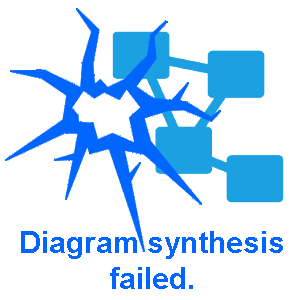
<style>
.page{position:relative;width:300px;height:300px;background:#ffffff}
.page>*{position:absolute;margin:0}
.t1{font:30px "Arial-BoldMT";color:#0066ff}
</style>
<div class="page">
<p class="t1" style="left:21px;top:231px;width:262px;height:58px;text-align:center">Diagram synthesis<br>failed.</p>
</div>
